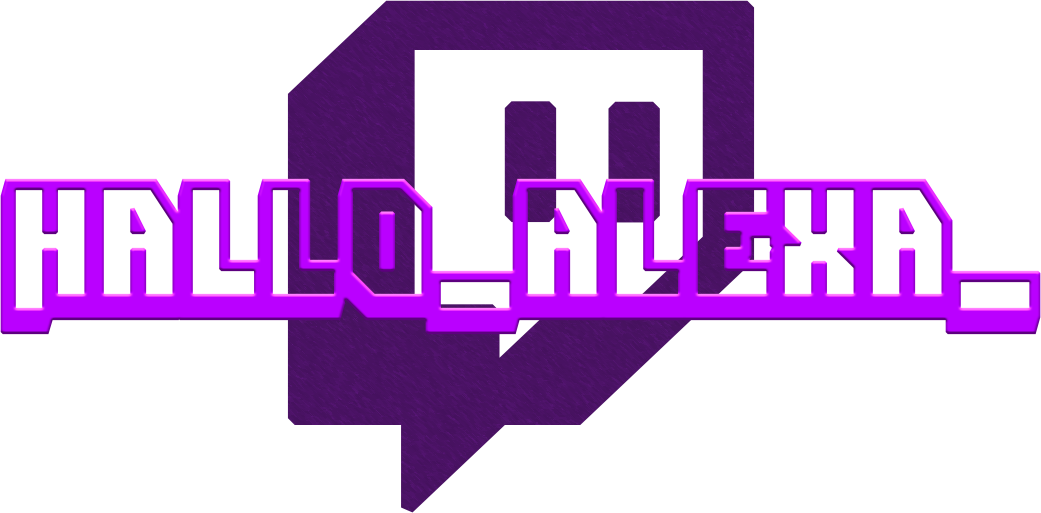
<style>
.page{position:relative;width:1041px;height:513px;background:#ffffff}
.page>*{position:absolute;margin:0}
.t1{font:155px "DimitriSwank";color:#ba00ff;font-weight:bold}
</style>
<div class="page">
<p class="t1" style="left:0px;top:178px;width:1041px;height:157px">hallo_alexa_</p>
</div>
